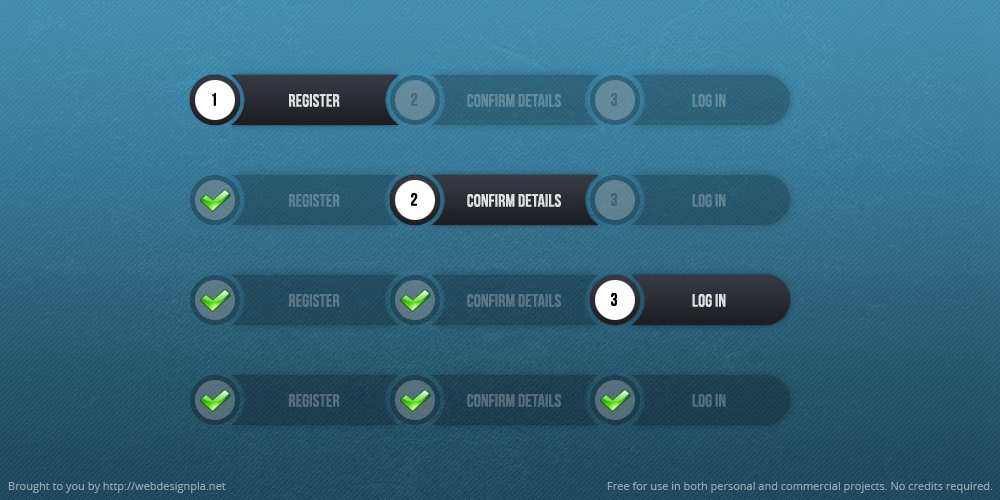
<style>
.page{position:relative;width:1000px;height:500px}
.page>*{position:absolute;margin:0}
.t1{font:18px "BebasNeue";color:#000000}
.t2{font:18px "BebasNeue";color:#dfe0e1}
.t3{font:18px "BebasNeue";color:#496774}
.t4{font:18px "BebasNeue";color:#62899c}
.t5{font:18px "BebasNeue";color:#61899b}
.t6{font:18px "BebasNeue";color:#5d8092}
.t7{font:18px "BebasNeue";color:#46606d}
.t8{font:18px "BebasNeue";color:#5d8091}
.t9{font:18px "BebasNeue";color:#597785}
.t10{font:18px "BebasNeue";color:#556e7b}
.t11{font:18px "BebasNeue";color:#556f7b}
.t12{font:18px "BebasNeue";color:#536e7a}
.t13{font:11px "OpenSans";color:#8fa4ad}
.t14{font:11px "OpenSans";color:#8fa4ae}
</style>
<div class="page">
<p class="t1" style="left:212px;top:93px;width:4px;height:13px">1</p>
<p class="t2" style="left:289px;top:94px;width:51px;height:13px">REGISTER</p>
<p class="t3" style="left:411px;top:93px;width:7px;height:13px">2</p>
<p class="t4" style="left:467px;top:94px;width:94px;height:13px">CONFIRM DETAILS</p>
<p class="t3" style="left:611px;top:93px;width:6px;height:13px">3</p>
<p class="t5" style="left:692px;top:94px;width:34px;height:13px">LOG IN</p>
<p class="t6" style="left:289px;top:194px;width:51px;height:13px">REGISTER</p>
<p class="t1" style="left:411px;top:193px;width:7px;height:13px">2</p>
<p class="t2" style="left:467px;top:194px;width:94px;height:13px">CONFIRM DETAILS</p>
<p class="t7" style="left:611px;top:193px;width:6px;height:13px">3</p>
<p class="t8" style="left:692px;top:194px;width:34px;height:13px">LOG IN</p>
<p class="t9" style="left:289px;top:294px;width:51px;height:13px">REGISTER</p>
<p class="t9" style="left:467px;top:294px;width:94px;height:13px">CONFIRM DETAILS</p>
<p class="t1" style="left:611px;top:293px;width:6px;height:13px">3</p>
<p class="t2" style="left:692px;top:294px;width:34px;height:13px">LOG IN</p>
<p class="t10" style="left:289px;top:394px;width:51px;height:13px">REGISTER</p>
<p class="t11" style="left:467px;top:394px;width:94px;height:13px">CONFIRM DETAILS</p>
<p class="t12" style="left:692px;top:394px;width:34px;height:13px">LOG IN</p>
<p class="t13" style="left:8px;top:482px;width:218px;height:11px">Brought to you by http://webdesignpla.net</p>
<p class="t14" style="left:607px;top:482px;width:386px;height:11px">Free for use in both personal and commercial projects. No credits required.</p>
</div>
